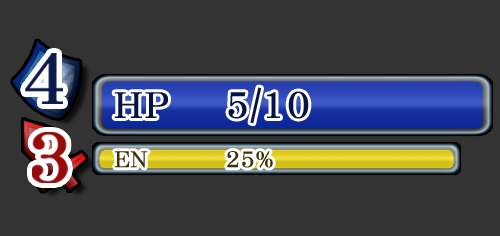
<style>
.page{position:relative;width:500px;height:236px;background:#333333}
.page>*{position:absolute;margin:0}
.t1{font:41.7px "DFNMing-W9-WINP-BF";color:#061348}
.t2{font:25.6px "DFNMing-W9-WINP-BF";color:#3a3406}
</style>
<div class="page">
<p class="t1" style="left:114px;top:87px;width:195px;height:37px">HP    5/10</p>
<p class="t2" style="left:115px;top:151px;width:158px;height:17px">EN         25%</p>
</div>
